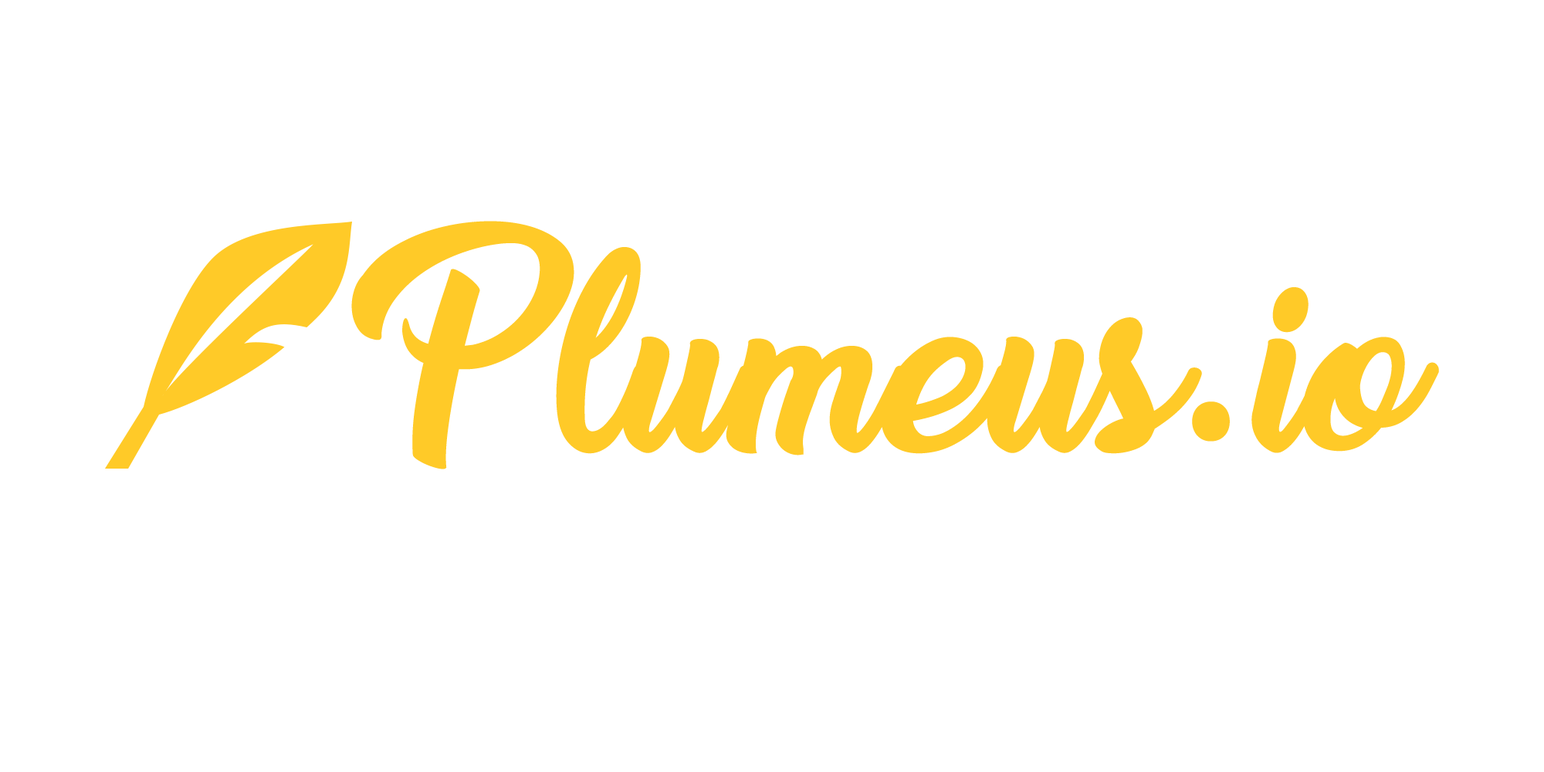
<style>
.page{position:relative;width:1544px;height:772px;background:#ffffff}
.page>*{position:absolute;margin:0}
.t1{font:314.8px "SweetSensationsPersonalUse";letter-spacing:0.02em;color:#ffca28}
.t2{font:314.8px "MyriadPro-Regular";letter-spacing:0.02em;color:#ffca28}
</style>
<div class="page">
<p class="t1" style="left:351px;top:221px;width:1088px;height:248px">Plumeus<span class="t2">.</span>io</p>
</div>
